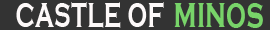
<style>
.page{position:relative;width:270px;height:30px;background:#333333}
.page>*{position:absolute;margin:0}
.t1{font:37.3px "CopperplateGothic-Bold";color:#fdf9f9;scale:0.63 1}
.t2{font:45px "CopperplateGothic-Bold";color:#78d469;scale:0.63 1}
</style>
<div class="page">
<p class="t1" style="left:16px;top:2px;width:148px;height:26px">CASTLE OF</p>
<p class="t2" style="left:174px;top:3px;width:89px;height:25px">minos</p>
</div>
